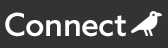
<style>
.page{position:relative;width:168px;height:48px;background:#333333}
.page>*{position:absolute;margin:0}
.t1{font:32px "AzoSans-Medium";letter-spacing:-0.025em;color:#ffffff}
</style>
<div class="page">
<p class="t1" style="left:5px;top:12px;width:121px;height:25px">Connect</p>
</div>
